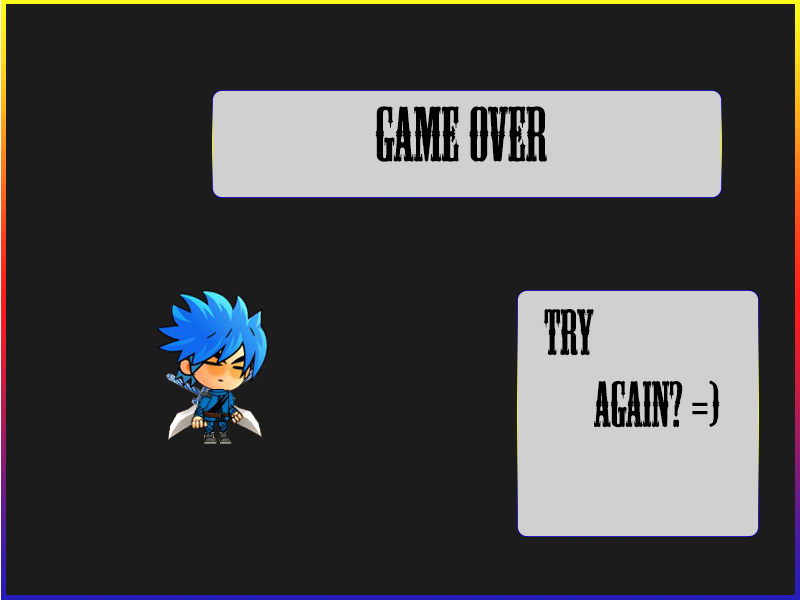
<style>
.page{position:relative;width:800px;height:600px;background:#1c1c1c}
.page>*{position:absolute;margin:0}
.t1{font:72px "MesquiteStd";color:#000000}
.t2{font:60px "MesquiteStd";color:#000000}
</style>
<div class="page">
<p class="t1" style="left:375px;top:106px;width:172px;height:56px">GAME OVER</p>
<p class="t2" style="left:543px;top:309px;width:177px;height:119px">TRY<br>    AGAIN? =)</p>
</div>
